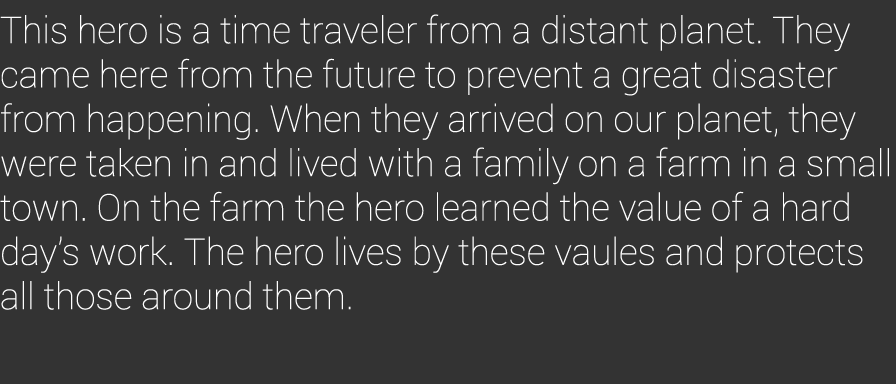
<style>
.page{position:relative;width:896px;height:384px;background:#333333}
.page>*{position:absolute;margin:0}
.t1{font:36.9px "Roboto-Thin";color:#ffffff}
</style>
<div class="page">
<p class="t1" style="left:0px;top:14px;width:889px;height:296px">This hero is a time traveler from a distant planet. They came here from the future to prevent a great disaster from happening. When they arrived on our planet, they were taken in and lived with a family on a farm in a small town. On the farm the hero learned the value of a hard day’s work. The hero lives by these vaules and protects all those around them.</p>
</div>
